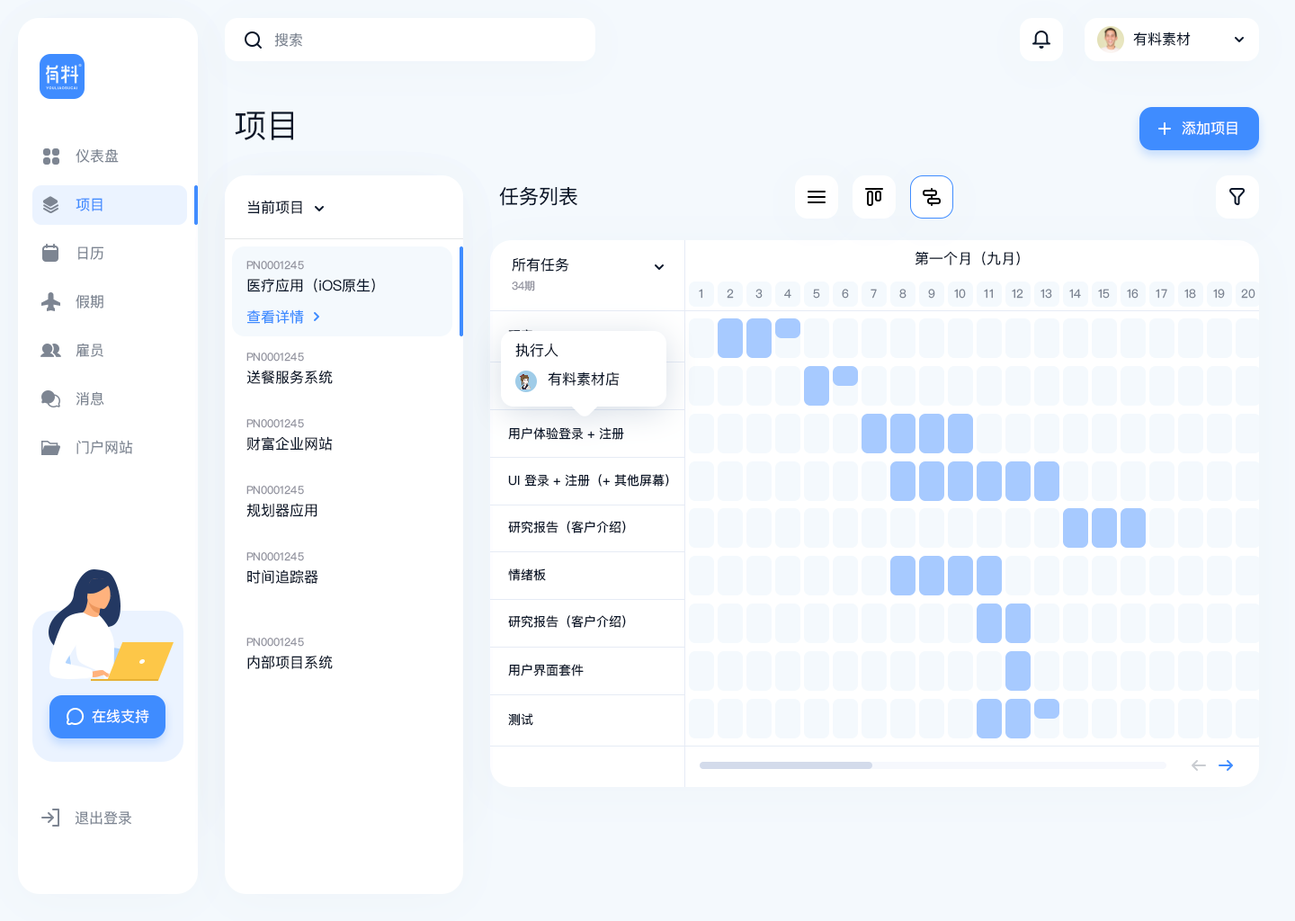
<style>
.page{position:relative;width:1295px;height:921px;background:#ffffff}
.page>*{position:absolute;margin:0}
.t1{font:14.4px "PingFangSC-Regular";color:#7d8592}
.t2{font:14.4px "PingFangSC-Regular";color:#0a1629}
.t3{font:32.4px "PingFangSC-Regular";color:#0a1629}
.t4{font:14.4px "PingFangSC-Regular";color:#ffffff}
.t5{font:14.4px "PingFangSC-Regular"}
.t6{font:14.4px "PingFangSC-Regular";color:#3f8cff}
.t7{font:19.8px "PingFangSC-Regular";color:#0a1629}
.t8{font:10.8px "PingFangSC-Regular";color:#91929e}
.t9{font:11.7px "PingFangSC-Regular";color:#7d8593}
.t10{font:12.6px "PingFangSC-Regular";color:#0a1629}
</style>
<div class="page">
<p class="t1" style="left:274px;top:32px;width:28px;height:15px">搜索</p>
<p class="t2" style="left:1133px;top:31px;width:58px;height:15px">有料素材</p>
<p class="t3" style="left:235px;top:112px;width:58px;height:28px">项目</p>
<p class="t4" style="left:1182px;top:121px;width:55px;height:14px">添加项目</p>
<p class="t5" style="left:76px;top:147px;width:43px;height:15px">仪表盘</p>
<p class="t1" style="left:76px;top:148px;width:43px;height:15px">仪表盘</p>
<p class="t5" style="left:76px;top:197px;width:27px;height:13px">项目</p>
<p class="t6" style="left:76px;top:198px;width:27px;height:13px">项目</p>
<p class="t7" style="left:499px;top:186px;width:78px;height:20px">任务列表</p>
<p class="t2" style="left:247px;top:200px;width:55px;height:14px">当前项目</p>
<p class="t2" style="left:247px;top:200px;width:55px;height:14px">当前项目</p>
<p class="t5" style="left:78px;top:245px;width:25px;height:14px">日历</p>
<p class="t1" style="left:78px;top:246px;width:25px;height:14px">日历</p>
<p class="t2" style="left:512px;top:257px;width:57px;height:15px">所有任务</p>
<p class="t2" style="left:915px;top:251px;width:105px;height:14px">第一个月（九月）</p>
<p class="t8" style="left:246px;top:261px;width:58px;height:9px">PN0001245</p>
<p class="t8" style="left:246px;top:261px;width:58px;height:9px">PN0001245</p>
<p class="t2" style="left:247px;top:278px;width:132px;height:14px">医疗应用（iOS 原生）</p>
<p class="t2" style="left:247px;top:278px;width:128px;height:14px">医疗应用（iOS原生）</p>
<p class="t8" style="left:512px;top:281px;width:23px;height:10px">34期</p>
<p class="t5" style="left:76px;top:293px;width:27px;height:15px">假期</p>
<p class="t9" style="left:699px;top:289px;width:3px;height:10px">1</p>
<p class="t9" style="left:727px;top:289px;width:7px;height:10px">2</p>
<p class="t9" style="left:755px;top:289px;width:8px;height:10px">3</p>
<p class="t9" style="left:784px;top:289px;width:7px;height:10px">4</p>
<p class="t9" style="left:813px;top:289px;width:7px;height:10px">5</p>
<p class="t9" style="left:842px;top:289px;width:7px;height:10px">6</p>
<p class="t9" style="left:870px;top:289px;width:7px;height:10px">7</p>
<p class="t9" style="left:899px;top:289px;width:7px;height:10px">8</p>
<p class="t9" style="left:928px;top:289px;width:7px;height:10px">9</p>
<p class="t9" style="left:954px;top:289px;width:12px;height:10px">10</p>
<p class="t9" style="left:984px;top:289px;width:9px;height:10px">11</p>
<p class="t9" style="left:1012px;top:289px;width:11px;height:10px">12</p>
<p class="t9" style="left:1040px;top:289px;width:12px;height:10px">13</p>
<p class="t9" style="left:1069px;top:289px;width:12px;height:10px">14</p>
<p class="t9" style="left:1098px;top:289px;width:12px;height:10px">15</p>
<p class="t9" style="left:1127px;top:289px;width:11px;height:10px">16</p>
<p class="t9" style="left:1156px;top:289px;width:11px;height:10px">17</p>
<p class="t9" style="left:1184px;top:289px;width:12px;height:10px">18</p>
<p class="t9" style="left:1213px;top:289px;width:12px;height:10px">19</p>
<p class="t9" style="left:1241px;top:289px;width:14px;height:10px">20</p>
<p class="t1" style="left:76px;top:294px;width:27px;height:14px">假期</p>
<p class="t5" style="left:246px;top:308px;width:58px;height:14px">查看详情</p>
<p class="t6" style="left:246px;top:309px;width:58px;height:15px">查看详情</p>
<p class="t5" style="left:76px;top:342px;width:27px;height:14px">雇员</p>
<p class="t1" style="left:76px;top:343px;width:27px;height:14px">雇员</p>
<p class="t8" style="left:246px;top:353px;width:58px;height:9px">PN0001245</p>
<p class="t8" style="left:246px;top:353px;width:58px;height:9px">PN0001245</p>
<p class="t2" style="left:515px;top:343px;width:43px;height:14px">执行人</p>
<p class="t2" style="left:246px;top:370px;width:58px;height:14px">送餐服务</p>
<p class="t2" style="left:246px;top:370px;width:87px;height:14px">送餐服务系统</p>
<p class="t2" style="left:548px;top:371px;width:72px;height:15px">有料素材店</p>
<p class="t1" style="left:76px;top:391px;width:28px;height:15px">消息</p>
<p class="t8" style="left:246px;top:419px;width:58px;height:9px">PN0001245</p>
<p class="t8" style="left:246px;top:419px;width:58px;height:9px">PN0001245</p>
<p class="t5" style="left:246px;top:436px;width:58px;height:15px">财富网站</p>
<p class="t2" style="left:246px;top:436px;width:87px;height:15px">财富企业网站</p>
<p class="t10" style="left:508px;top:427px;width:116px;height:13px">用户体验登录 + 注册</p>
<p class="t1" style="left:76px;top:440px;width:57px;height:14px">门户网站</p>
<p class="t10" style="left:508px;top:474px;width:161px;height:13px">UI 登录 + 注册（+ 其他屏幕）</p>
<p class="t8" style="left:246px;top:486px;width:58px;height:9px">PN0001245</p>
<p class="t8" style="left:246px;top:486px;width:58px;height:9px">PN0001245</p>
<p class="t2" style="left:246px;top:503px;width:101px;height:14px">规划器应用程序</p>
<p class="t2" style="left:246px;top:503px;width:71px;height:14px">规划器应用</p>
<p class="t10" style="left:508px;top:521px;width:118px;height:12px">研究报告（客户介绍）</p>
<p class="t8" style="left:246px;top:552px;width:58px;height:9px">PN0001245</p>
<p class="t8" style="left:246px;top:552px;width:58px;height:9px">PN0001245</p>
<p class="t5" style="left:247px;top:569px;width:146px;height:15px">时间追踪器 - 个人账户</p>
<p class="t2" style="left:247px;top:569px;width:71px;height:15px">时间追踪器</p>
<p class="t10" style="left:508px;top:568px;width:38px;height:13px">情绪板</p>
<p class="t10" style="left:508px;top:615px;width:118px;height:13px">研究报告（客户介绍）</p>
<p class="t8" style="left:246px;top:638px;width:58px;height:9px">PN0001245</p>
<p class="t8" style="left:246px;top:638px;width:58px;height:9px">PN0001245</p>
<p class="t2" style="left:247px;top:655px;width:55px;height:14px">内部项目</p>
<p class="t2" style="left:247px;top:655px;width:86px;height:14px">内部项目系统</p>
<p class="t10" style="left:508px;top:664px;width:76px;height:12px">用户界面套件</p>
<p class="t4" style="left:92px;top:709px;width:57px;height:14px">在线支持</p>
<p class="t10" style="left:508px;top:713px;width:25px;height:13px">测试</p>
<p class="t1" style="left:75px;top:810px;width:56px;height:15px">退出登录</p>
</div>
